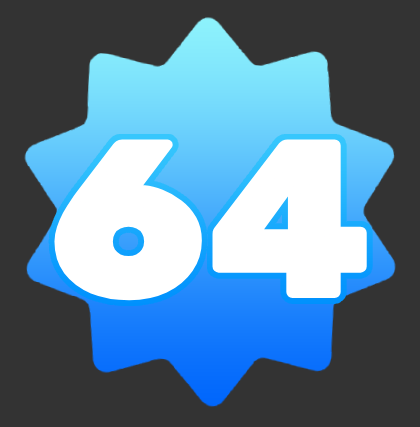
<style>
.page{position:relative;width:420px;height:427px;background:#333333}
.page>*{position:absolute;margin:0}
.t1{font:226.4px "Rubik-Black";color:#ffffff}
</style>
<div class="page">
<p class="t1" style="left:54px;top:139px;width:313px;height:162px">64</p>
</div>
